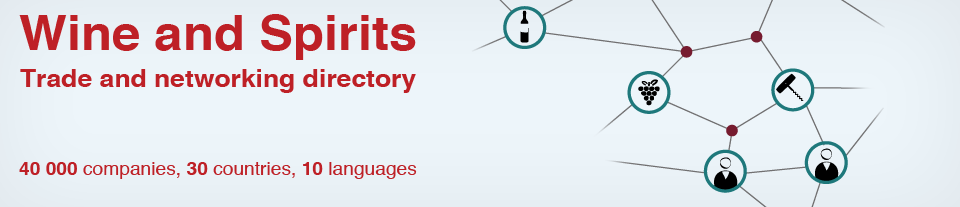
<style>
.page{position:relative;width:960px;height:207px;background:#edf5fa}
.page>*{position:absolute;margin:0}
.t1{font:48px "Helvetica-Bold";color:#be2026;scale:1.06 1}
.t2{font:25px "Helvetica-Bold";color:#be2026;scale:1.06 1}
.t3{font:18.1px "Helvetica";color:#be2026;scale:1.06 1}
.t4{font:18.1px "Helvetica-Bold";color:#be2026;scale:1.06 1}
</style>
<div class="page">
<p class="t1" style="left:19px;top:14px;width:397px;height:46px">Wine and Spirits</p>
<p class="t2" style="left:20px;top:69px;width:396px;height:24px">Trade and networking directory</p>
<p class="t3" style="left:19px;top:162px;width:398px;height:17px"><span class="t4">40 000</span> companies, <span class="t4">30</span> countries, <span class="t4">10 </span>languages</p>
</div>
